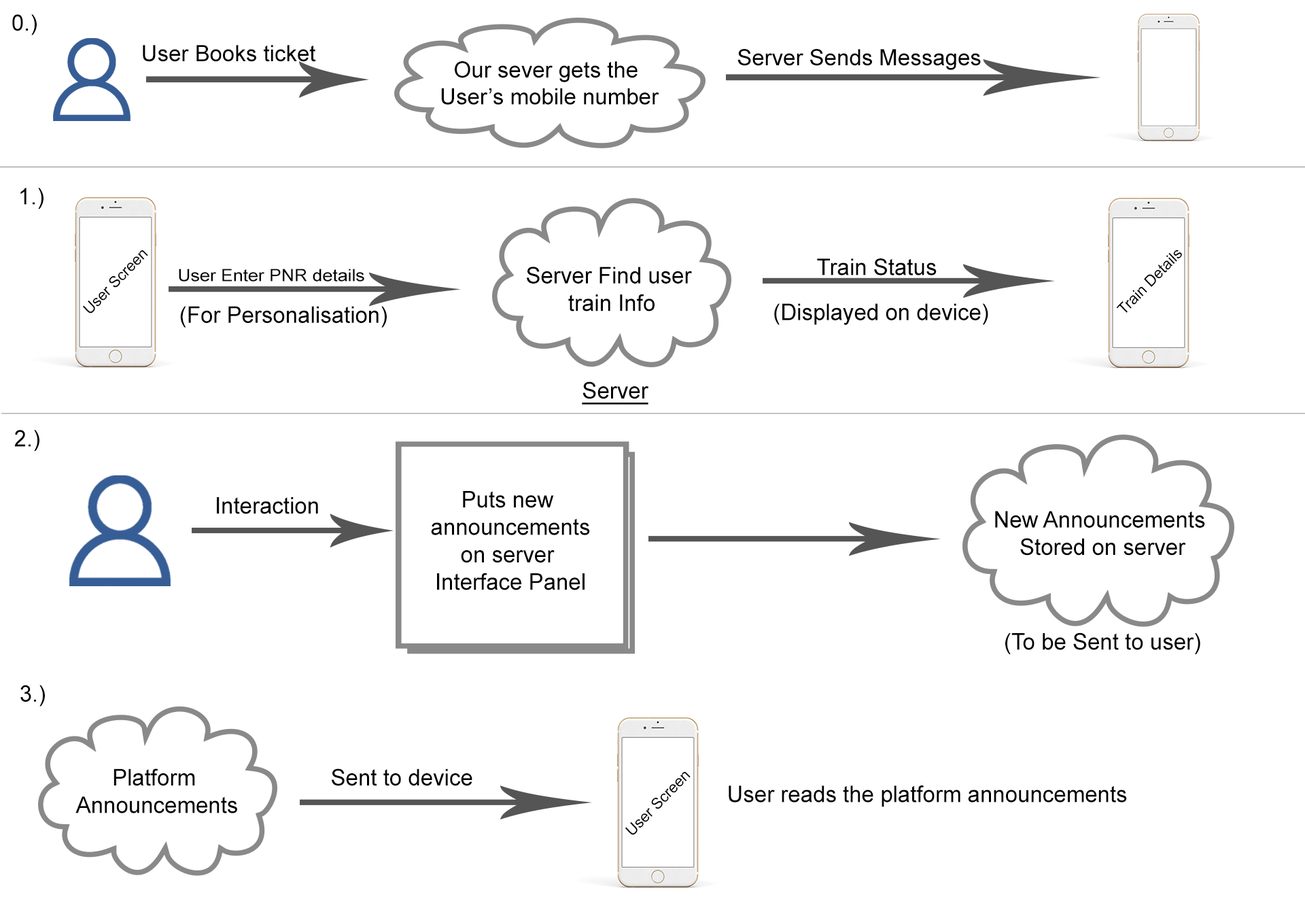
<style>
.page{position:relative;width:1305px;height:914px;background:#ffffff}
.page>*{position:absolute;margin:0}
.t1{font:22.4px "ArialMT";color:#000000}
.t2{font:22.9px "ArialMT";color:#000000}
.t3{font:15.3px "ArialMT";color:#000000}
.t4{font:17px "ArialMT";color:#000000;scale:1.06 1}
.t5{font:22.9px "ArialMT";color:#000000;text-decoration:underline}
</style>
<div class="page">
<p class="t1" style="left:12px;top:14px;width:25px;height:21px">0.)</p>
<p class="t1" style="left:143px;top:45px;width:173px;height:17px">User Books ticket</p>
<p class="t1" style="left:738px;top:49px;width:243px;height:21px">Server Sends Messages</p>
<p class="t1" style="left:441px;top:61px;width:218px;height:44px;text-align:center">Our sever gets the <br>User’s mobile number</p>
<p class="t2" style="left:20px;top:188px;width:24px;height:21px">1.)</p>
<p class="t3" style="left:82px;top:250px;width:66px;height:63px;rotate:-46deg">User Screen</p>
<p class="t3" style="left:1116px;top:249px;width:66px;height:64px;rotate:-46deg">Train Details</p>
<p class="t4" style="left:179px;top:269px;width:185px;height:12px">User Enter PNR details</p>
<p class="t2" style="left:527px;top:266px;width:165px;height:45px;text-align:center">Server Find user <br>train Info</p>
<p class="t2" style="left:817px;top:258px;width:120px;height:17px">Train Status</p>
<p class="t2" style="left:180px;top:306px;width:207px;height:22px">(For Personalisation)</p>
<p class="t2" style="left:774px;top:303px;width:214px;height:22px">(Displayed on device)</p>
<p class="t5" style="left:582px;top:381px;width:67px;height:23px">Server</p>
<p class="t2" style="left:14px;top:430px;width:25px;height:21px">2.)</p>
<p class="t2" style="left:217px;top:497px;width:101px;height:17px">Interaction</p>
<p class="t2" style="left:431px;top:491px;width:159px;height:99px;text-align:center">Puts new <br>announcements<br>on server <br>Interface Panel</p>
<p class="t2" style="left:995px;top:511px;width:210px;height:44px;text-align:center">New Announcements <br>Stored on server</p>
<p class="t2" style="left:1005px;top:632px;width:195px;height:22px">(To be Sent to user)</p>
<p class="t2" style="left:20px;top:685px;width:25px;height:21px">3.)</p>
<p class="t2" style="left:75px;top:768px;width:162px;height:45px;text-align:center">Platform <br>Announcements</p>
<p class="t2" style="left:332px;top:768px;width:140px;height:18px">Sent to device</p>
<p class="t3" style="left:625px;top:772px;width:66px;height:63px;rotate:-46deg">User Screen</p>
<p class="t2" style="left:729px;top:785px;width:398px;height:22px">User reads the platform announcements</p>
</div>
